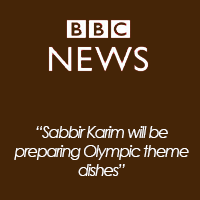
<style>
.page{position:relative;width:200px;height:200px;background:#452507}
.page>*{position:absolute;margin:0}
.t1{font:16px "CenturyGothic-Italic";letter-spacing:-0.075em;color:#ffffff}
</style>
<div class="page">
<p class="t1" style="left:14px;top:126px;width:175px;height:50px;text-align:center">“Sabbir Karim will be<br>preparing Olympic theme<br>dishes”</p>
</div>
